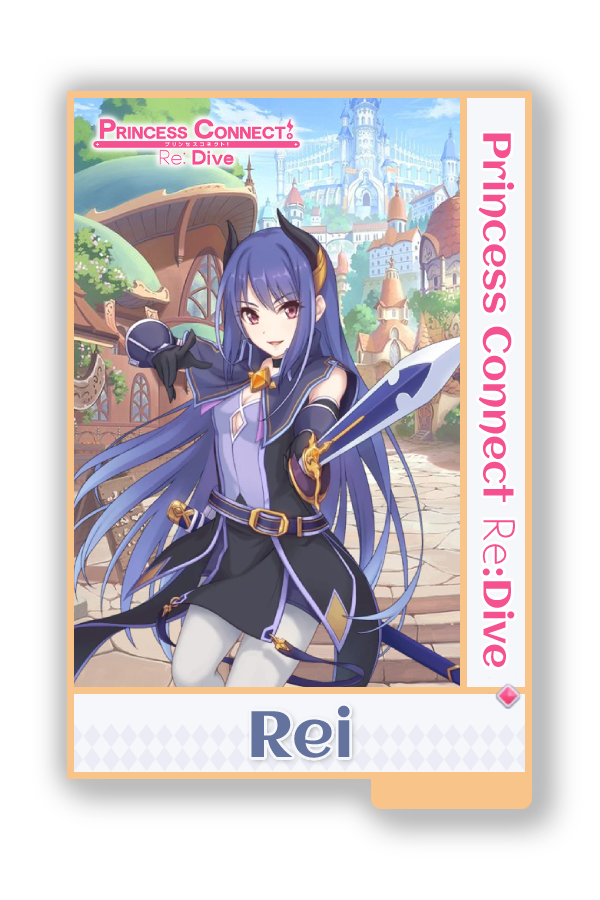
<style>
.page{position:relative;width:600px;height:900px;background:#ffffff}
.page>*{position:absolute;margin:0}
.t1{font:39px "Aclonica-Regular";color:#f55191}
.t2{font:39px "AaarghNormal";color:#f55191}
.t3{font:65px "Aclonica-Regular";color:#64739d}
</style>
<div class="page">
<p class="t1" style="left:478px;top:133px;width:38px;height:534px;rotate:90deg">Princess Connect <span class="t2">Re</span>:Dive</p>
<p class="t3" style="left:251px;top:705px;width:99px;height:53px">Rei</p>
</div>
